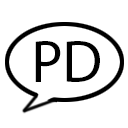
<style>
.page{position:relative;width:128px;height:128px;background:#ffffff}
.page>*{position:absolute;margin:0}
.t1{font:60px "MyriadPro-Regular";color:#000000}
</style>
<div class="page">
<p class="t1" style="left:35px;top:41px;width:26px;height:41px">P</p>
<p class="t1" style="left:66px;top:41px;width:34px;height:41px">D</p>
</div>
